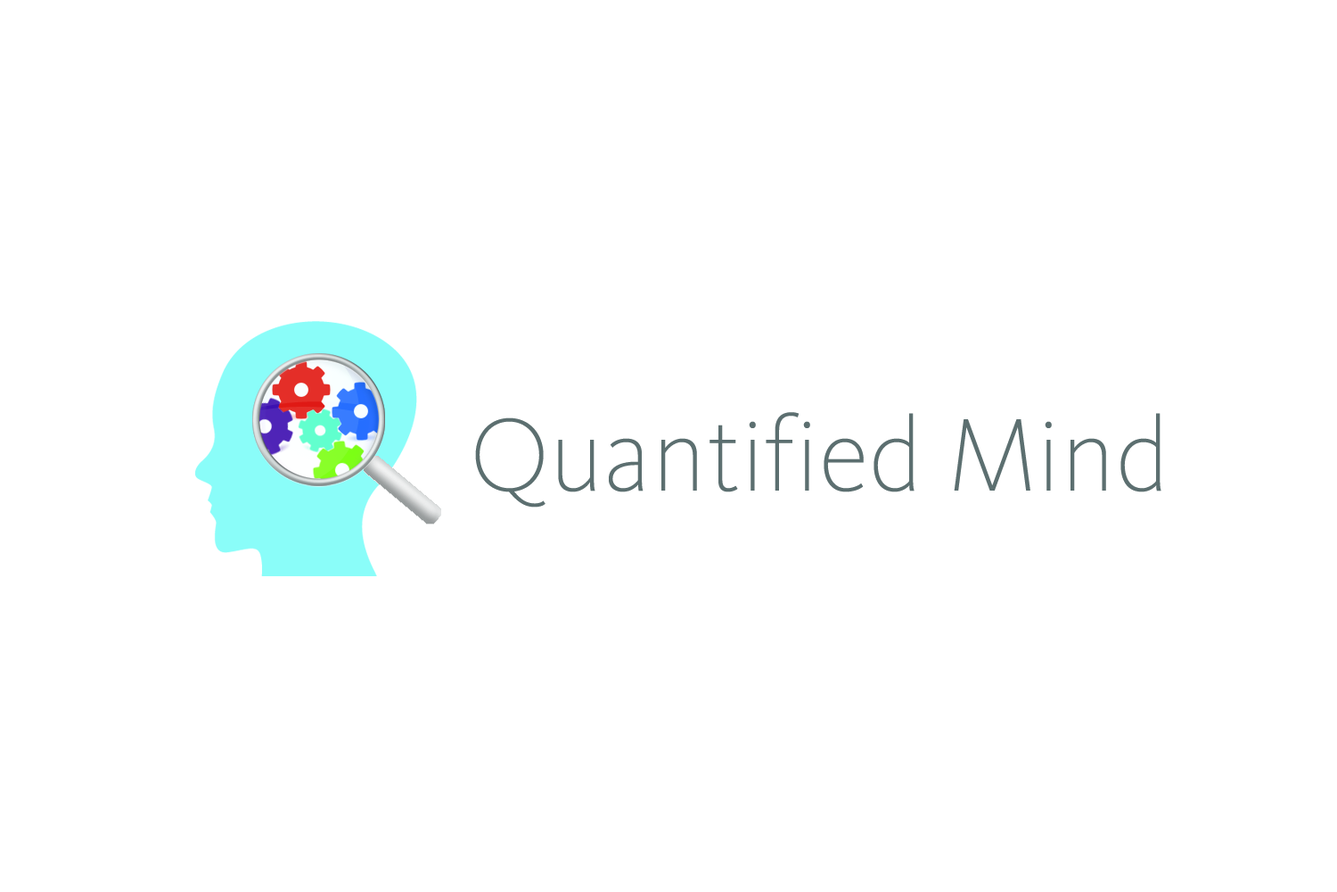
<style>
.page{position:relative;width:1337px;height:892px;background:#ffffff}
.page>*{position:absolute;margin:0}
.t1{font:107px "KievitOT-ExtraLight";color:#5d6f70}
</style>
<div class="page">
<p class="t1" style="left:475px;top:412px;width:687px;height:95px">Quantif ied Mind</p>
</div>
